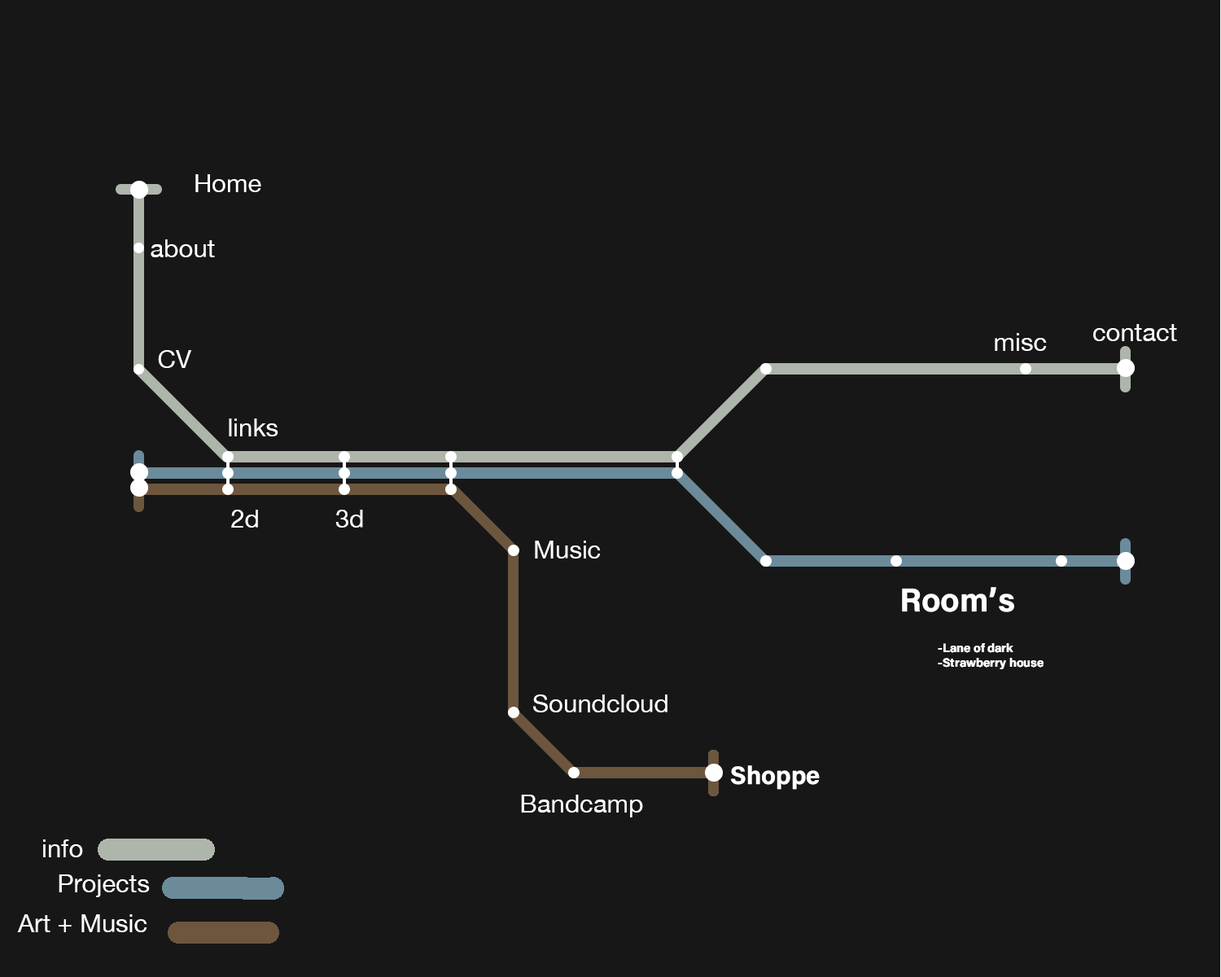
<style>
.page{position:relative;width:1221px;height:977px;background:#171717}
.page>*{position:absolute;margin:0}
.t1{font:25.2px "HelveticaNeue";color:#ffffff}
.t2{font:33.1px "AcuminConcept-Bold";color:#ffffff}
.t3{font:12.2px "AcuminConcept-Bold";color:#ffffff}
.t4{font:25.3px "AcuminConcept-Bold";color:#ffffff}
</style>
<div class="page">
<p class="t1" style="left:195px;top:174px;width:66px;height:18px">Home</p>
<p class="t1" style="left:151px;top:239px;width:64px;height:18px">about</p>
<p class="t1" style="left:1093px;top:324px;width:84px;height:17px">contact</p>
<p class="t1" style="left:995px;top:333px;width:52px;height:18px">misc</p>
<p class="t1" style="left:158px;top:350px;width:33px;height:18px">CV</p>
<p class="t1" style="left:229px;top:418px;width:49px;height:18px">links</p>
<p class="t1" style="left:231px;top:510px;width:27px;height:17px">2d</p>
<p class="t1" style="left:335px;top:510px;width:28px;height:17px">3d</p>
<p class="t1" style="left:535px;top:540px;width:66px;height:18px">Music</p>
<p class="t2" style="left:902px;top:587px;width:112px;height:25px">Room’s</p>
<p class="t3" style="left:938px;top:643px;width:105px;height:26px">-Lane of dark<br>-Strawberry house</p>
<p class="t1" style="left:533px;top:694px;width:134px;height:18px">Soundcloud</p>
<p class="t4" style="left:731px;top:765px;width:89px;height:25px">Shoppe</p>
<p class="t1" style="left:521px;top:794px;width:122px;height:23px">Bandcamp</p>
<p class="t1" style="left:43px;top:839px;width:40px;height:18px">info</p>
<p class="t1" style="left:59px;top:874px;width:91px;height:23px">Projects</p>
<p class="t1" style="left:17px;top:914px;width:130px;height:18px">Art + Music</p>
</div>
